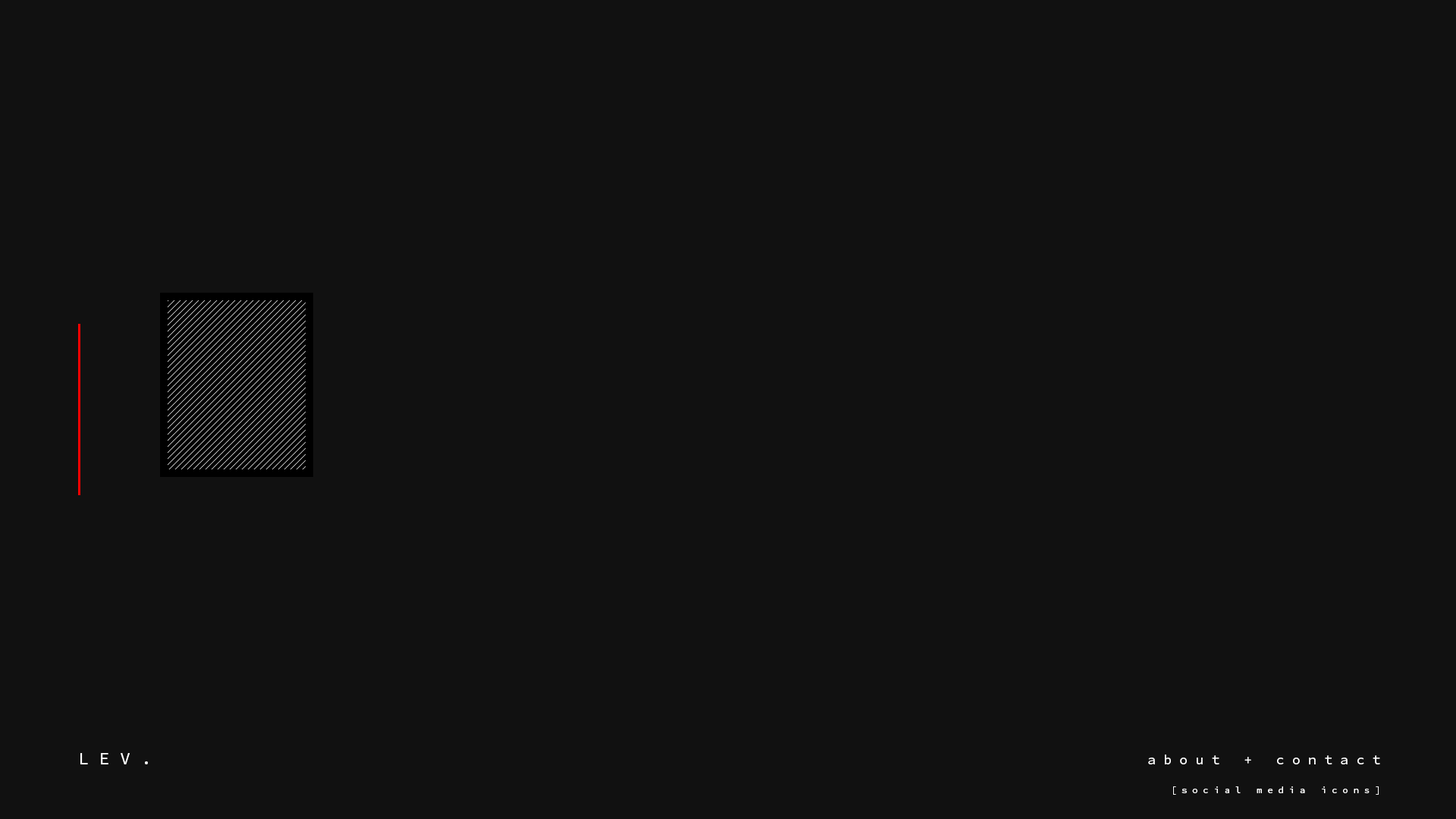
<style>
.page{position:relative;width:1456px;height:819px;background:#111111}
.page>*{position:absolute;margin:0}
.t1{font:17.4px "SourceCodePro-Regular";letter-spacing:0.6em;color:#ffffff}
.t2{font:13.6px "SourceCodePro-Regular";letter-spacing:0.58em;color:#ffffff}
.t3{font:9.1px "SourceCodePro-Regular";letter-spacing:0.58em;color:#ffffff}
</style>
<div class="page">
<p class="t1" style="left:80px;top:753px;width:68px;height:11px">LEV.</p>
<p class="t2" style="left:1148px;top:755px;width:232px;height:9px">about + contact</p>
<p class="t3" style="left:1173px;top:786px;width:206px;height:9px">[social media icons]</p>
</div>
